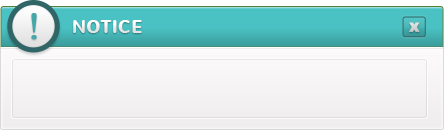
<style>
.page{position:relative;width:444px;height:130px}
.page>*{position:absolute;margin:0}
.t1{font:17.7px "Nunito-Bold";letter-spacing:0.025em;color:#fefefe}
</style>
<div class="page">
<p class="t1" style="left:73px;top:20px;width:69px;height:13px">NOTICE</p>
</div>
